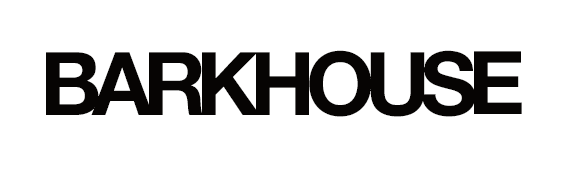
<style>
.page{position:relative;width:567px;height:170px;background:#ffffff}
.page>*{position:absolute;margin:0}
.t1{font:88px "HelveticaNeue-Bold";letter-spacing:-0.11em;color:#060403}
</style>
<div class="page">
<p class="t1" style="left:46px;top:50px;width:476px;height:67px">BARKHOUSE</p>
</div>
